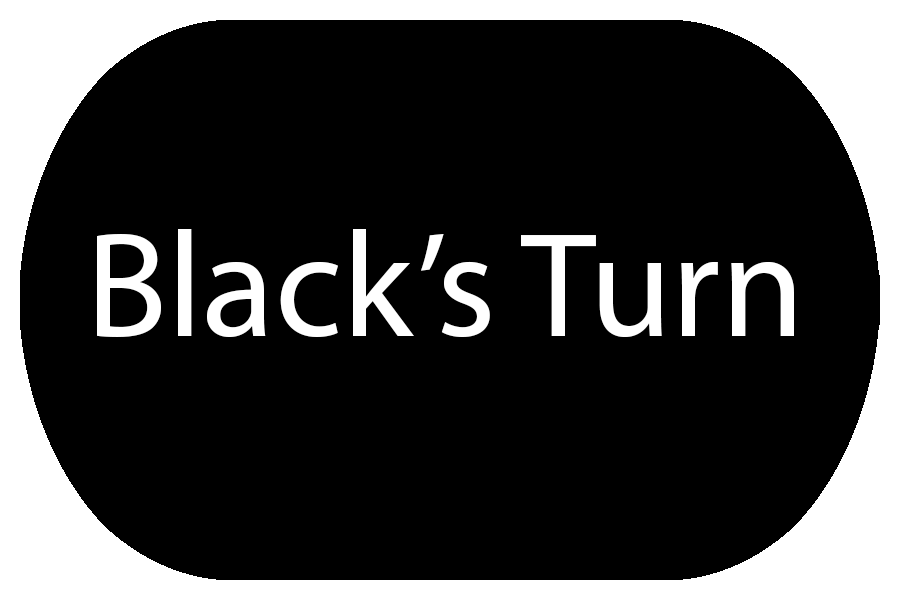
<style>
.page{position:relative;width:900px;height:600px;background:#000000}
.page>*{position:absolute;margin:0}
.t1{font:150px "MyriadPro-Regular";color:#ffffff}
</style>
<div class="page">
<p class="t1" style="left:97px;top:229px;width:697px;height:108px">Black’s Turn</p>
</div>
